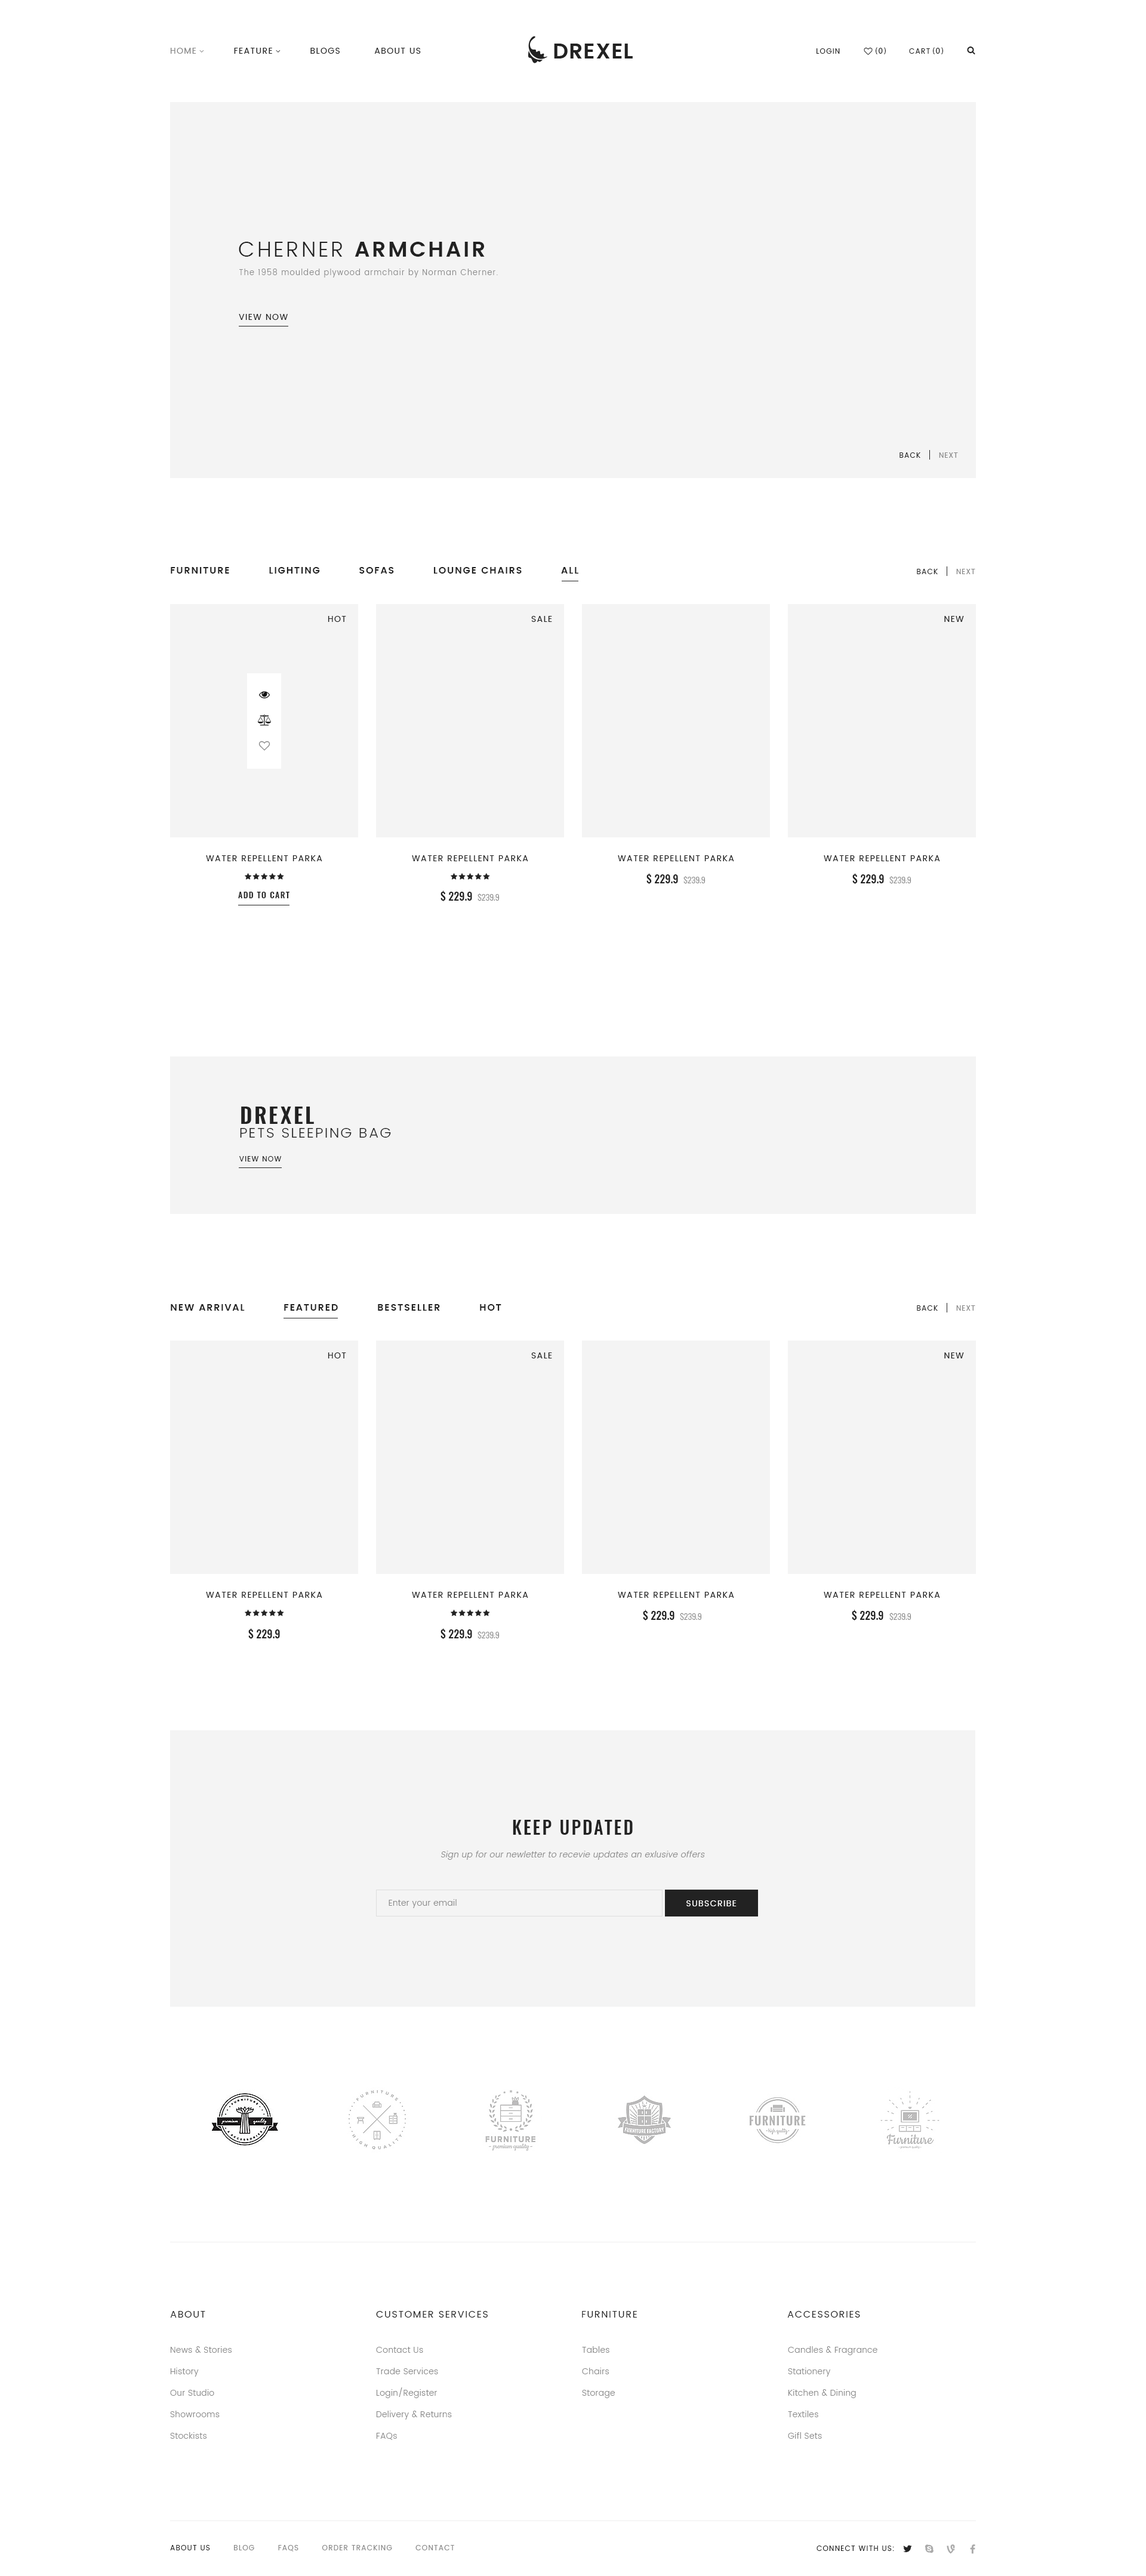
<style>
.page{position:relative;width:1146px;height:2576px;background:#ffffff}
.page>*{position:absolute;margin:0}
.t1{font:8.4px "Poppins-Regular";letter-spacing:0.1em;color:#222222;text-transform:uppercase}
.t2{font:8.4px "Poppins-Regular";letter-spacing:0.1em;color:#888888;text-transform:uppercase}
.t3{font:7.2px "Poppins-Regular";letter-spacing:0.1em;color:#222222;text-transform:uppercase}
.t4{font:8.4px "MyriadPro-Regular";letter-spacing:0.1em;color:#222222;text-transform:uppercase}
.t5{font:21.5px "Poppins-SemiBold";letter-spacing:0.1em;color:#222222;text-transform:uppercase}
.t6{font:21.5px "Poppins-Light";letter-spacing:0.1em;color:#222222;text-transform:uppercase}
.t7{font:7.8px "Poppins-Light";letter-spacing:0.1em;color:#888888}
.t8{font:7.2px "MyriadPro-Regular";letter-spacing:0.1em;color:#888888;text-transform:uppercase}
.t9{font:7.2px "Poppins-Regular";letter-spacing:0.1em;color:#888888;text-transform:uppercase}
.t10{font:9.5px "Poppins-SemiBold";letter-spacing:0.1em;color:#222222;text-transform:uppercase}
.t11{font:10.7px "Oswald-Medium";color:#222222}
.t12{font:8.4px "Oswald-Light";color:#888888}
.t13{font:8.4px "Oswald-Medium";letter-spacing:0.1em;color:#222222;text-transform:uppercase}
.t14{font:21.5px "Oswald-DemiBold";letter-spacing:0.1em;color:#222222;text-transform:uppercase}
.t15{font:14.3px "Poppins-Light";letter-spacing:0.1em;color:#222222;text-transform:uppercase}
.t16{font:17.9px "Oswald-Medium";letter-spacing:0.1em;color:#222222}
.t17{font:8.4px "Poppins-Light";letter-spacing:0.025em;color:#888888;font-style:italic}
.t18{font:8.4px "Poppins-Light";letter-spacing:0.025em;color:#888888}
.t19{font:8.4px "Poppins-Regular";letter-spacing:0.1em;color:#ffffff;text-transform:uppercase}
.t20{font:9.5px "Poppins-Regular";letter-spacing:0.1em;color:#222222;text-transform:uppercase}
.t21{font:8.4px/21.5px "Poppins-Light";letter-spacing:0.025em;color:#888888}
</style>
<div class="page">
<p class="t1" style="left:170px;top:48px;width:251px;height:6px"><span class="t2">Home</span>           Feature           Blogs          About Us</p>
<p class="t3" style="left:816px;top:48px;width:24px;height:6px">Login</p>
<p class="t4" style="left:876px;top:47px;width:10px;height:7px">(0)</p>
<p class="t3" style="left:909px;top:48px;width:21px;height:6px">Cart</p>
<p class="t4" style="left:933px;top:47px;width:10px;height:7px">(0)</p>
<p class="t5" style="left:239px;top:242px;width:246px;height:15px"><span class="t6">Cherner </span>Armchair</p>
<p class="t7" style="left:239px;top:269px;width:259px;height:9px">The 1958 moulded plywood armchair by Norman Cherner.</p>
<p class="t1" style="left:239px;top:314px;width:49px;height:6px">View now</p>
<p class="t3" style="left:899px;top:452px;width:21px;height:6px">Back</p>
<p class="t8" style="left:939px;top:452px;width:19px;height:6px"><span class="t9">N</span>ext</p>
<p class="t10" style="left:171px;top:567px;width:407px;height:7px">Furniture          Lighting          Sofas          Lounge Chairs          All</p>
<p class="t3" style="left:917px;top:569px;width:21px;height:5px">Back</p>
<p class="t8" style="left:956px;top:569px;width:19px;height:5px"><span class="t9">N</span>ext</p>
<p class="t1" style="left:328px;top:616px;width:18px;height:6px">Hot</p>
<p class="t1" style="left:531px;top:616px;width:21px;height:6px">SAle</p>
<p class="t1" style="left:944px;top:616px;width:20px;height:6px">New</p>
<p class="t1" style="left:206px;top:855px;width:116px;height:6px">Water Repellent Parka</p>
<p class="t1" style="left:412px;top:855px;width:116px;height:6px">Water Repellent Parka</p>
<p class="t1" style="left:618px;top:855px;width:116px;height:6px">Water Repellent Parka</p>
<p class="t1" style="left:824px;top:855px;width:116px;height:6px">Water Repellent Parka</p>
<p class="t11" style="left:646px;top:873px;width:59px;height:12px">$ 229.9  <span class="t12">$239.9</span></p>
<p class="t11" style="left:852px;top:873px;width:59px;height:12px">$ 229.9  <span class="t12">$239.9</span></p>
<p class="t13" style="left:238px;top:892px;width:51px;height:6px">Add to cart</p>
<p class="t11" style="left:440px;top:890px;width:60px;height:12px">$ 229.9  <span class="t12">$239.9</span></p>
<p class="t14" style="left:241px;top:1107px;width:73px;height:17px">Drexel</p>
<p class="t15" style="left:240px;top:1128px;width:151px;height:10px">Pets Sleeping bag</p>
<p class="t3" style="left:239px;top:1156px;width:43px;height:5px">View now</p>
<p class="t10" style="left:171px;top:1304px;width:330px;height:7px">New arrival          Featured          Bestseller          Hot</p>
<p class="t3" style="left:917px;top:1305px;width:21px;height:6px">Back</p>
<p class="t8" style="left:956px;top:1305px;width:19px;height:6px"><span class="t9">N</span>ext</p>
<p class="t1" style="left:328px;top:1352px;width:18px;height:6px">Hot</p>
<p class="t1" style="left:531px;top:1352px;width:21px;height:6px">SAle</p>
<p class="t1" style="left:944px;top:1352px;width:20px;height:6px">New</p>
<p class="t1" style="left:206px;top:1592px;width:116px;height:6px">Water Repellent Parka</p>
<p class="t1" style="left:412px;top:1592px;width:116px;height:6px">Water Repellent Parka</p>
<p class="t1" style="left:618px;top:1592px;width:116px;height:6px">Water Repellent Parka</p>
<p class="t1" style="left:824px;top:1592px;width:116px;height:6px">Water Repellent Parka</p>
<p class="t11" style="left:643px;top:1610px;width:59px;height:11px">$ 229.9  <span class="t12">$239.9</span></p>
<p class="t11" style="left:852px;top:1610px;width:59px;height:11px">$ 229.9  <span class="t12">$239.9</span></p>
<p class="t11" style="left:248px;top:1628px;width:32px;height:12px">$ 229.9</p>
<p class="t11" style="left:440px;top:1628px;width:60px;height:12px">$ 229.9  <span class="t12">$239.9</span></p>
<p class="t16" style="left:513px;top:1820px;width:120px;height:15px">KEEP UPDATED</p>
<p class="t17" style="left:441px;top:1851px;width:264px;height:9px">Sign up for our newletter to recevie updates an exlusive offers</p>
<p class="t18" style="left:389px;top:1899px;width:68px;height:9px">Enter your email</p>
<p class="t19" style="left:686px;top:1900px;width:51px;height:6px">Subscribe</p>
<p class="t20" style="left:170px;top:2311px;width:35px;height:7px">About</p>
<p class="t20" style="left:376px;top:2311px;width:112px;height:7px">Customer services</p>
<p class="t20" style="left:582px;top:2311px;width:55px;height:7px">Furniture</p>
<p class="t20" style="left:787px;top:2311px;width:73px;height:7px">Accessories</p>
<p class="t21" style="left:170px;top:2346px;width:62px;height:93px">News &amp; Stories<br>History<br>Our Studio<br>Showrooms<br>Stockists</p>
<p class="t21" style="left:376px;top:2347px;width:76px;height:93px">Contact Us<br>Trade Services<br>Login/Register<br>Delivery &amp; Returns<br>FAQs</p>
<p class="t21" style="left:582px;top:2346px;width:33px;height:52px">Tables<br>Chairs<br>Storage</p>
<p class="t21" style="left:788px;top:2346px;width:89px;height:93px">Candles &amp; Fragrance<br>Stationery<br>Kitchen &amp; Dining<br>Textiles<br>Gifl Sets</p>
<p class="t9" style="left:170px;top:2545px;width:284px;height:7px"><span class="t3">About Us</span>        Blog        FAQs        Order Tracking        Contact</p>
<p class="t3" style="left:816px;top:2546px;width:78px;height:5px">Connect with us:</p>
</div>
